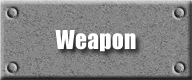
<style>
.page{position:relative;width:192px;height:80px}
.page>*{position:absolute;margin:0}
.t1{font:24px "Impact";color:#ffffff}
</style>
<div class="page">
<p class="t1" style="left:55px;top:30px;width:81px;height:22px">Weapon</p>
</div>
